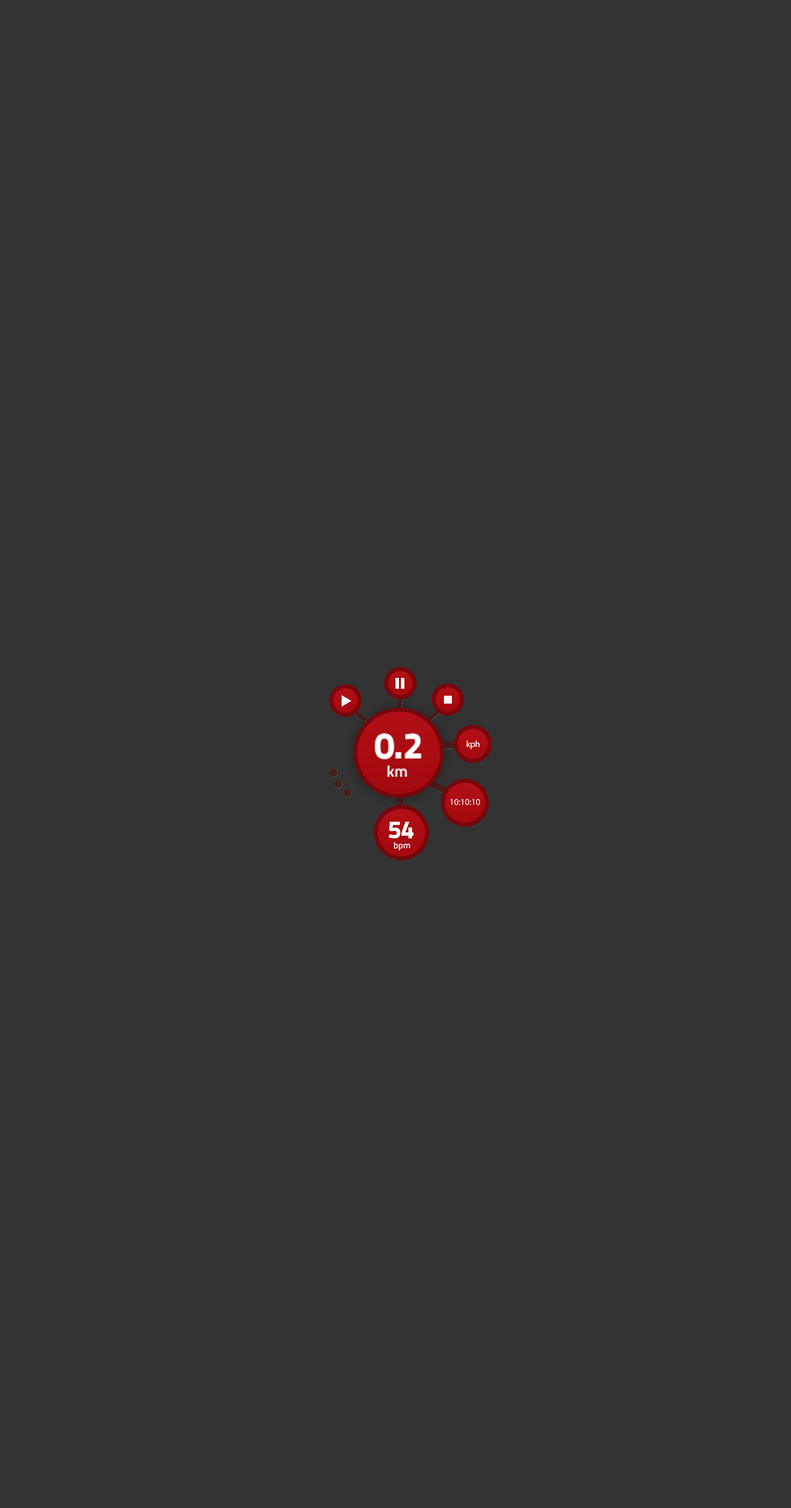
<style>
.page{position:relative;width:791px;height:1508px;background:#333333}
.page>*{position:absolute;margin:0}
.t1{font:36.7px "TitilliumText22L-XBold";letter-spacing:-0.005em;color:#ffffff;text-transform:uppercase}
.t2{font:8.9px "MyriadPro-Regular";letter-spacing:-0.005em;color:#ffffff}
.t3{font:15.5px "TitilliumText22L-Medium";letter-spacing:-0.005em;color:#ffffff}
.t4{font:8.9px "MyriadPro-Regular";letter-spacing:-0.005em;color:#ffffff;text-transform:uppercase}
.t5{font:24.7px "TitilliumText22L-XBold";letter-spacing:-0.005em;color:#ffffff;text-transform:uppercase}
.t6{font:8.9px "TitilliumText22L-Medium";letter-spacing:-0.005em;color:#ffffff}
</style>
<div class="page">
<p class="t1" style="left:375px;top:733px;width:47px;height:27px">0.2</p>
<p class="t2" style="left:466px;top:741px;width:13px;height:8px">kph</p>
<p class="t3" style="left:387px;top:765px;width:20px;height:12px">km</p>
<p class="t4" style="left:450px;top:799px;width:30px;height:6px">10:10:10</p>
<p class="t5" style="left:388px;top:822px;width:26px;height:17px">54</p>
<p class="t6" style="left:394px;top:842px;width:16px;height:8px">bpm</p>
</div>
